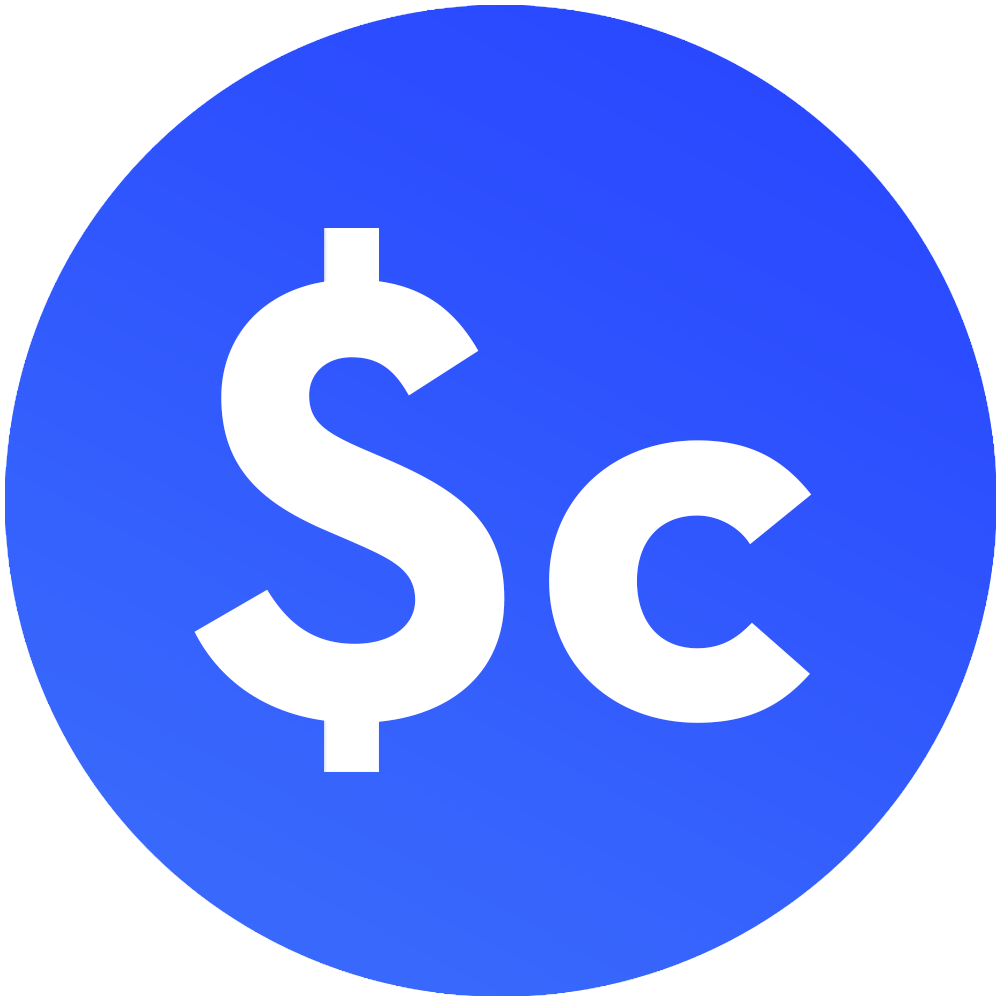
<style>
.page{position:relative;width:1000px;height:1000px;background:#ffffff}
.page>*{position:absolute;margin:0}
.t1{font:635.7px "NeutraText-Bold";letter-spacing:-0.005em;color:#ffffff}
</style>
<div class="page">
<p class="t1" style="left:194px;top:279px;width:618px;height:444px">Sc</p>
</div>
